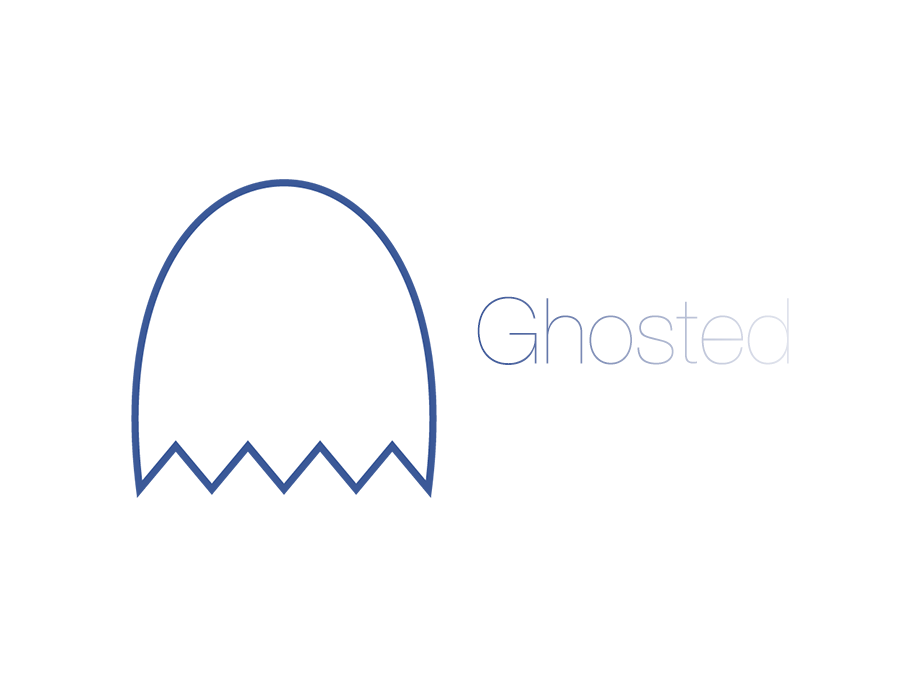
<style>
.page{position:relative;width:920px;height:680px;background:#ffffff}
.page>*{position:absolute;margin:0}
.t1{font:91.2px "HelveticaNeue-UltraLight"}
</style>
<div class="page">
<p class="t1" style="left:477px;top:296px;width:312px;height:69px">Ghosted</p>
</div>
